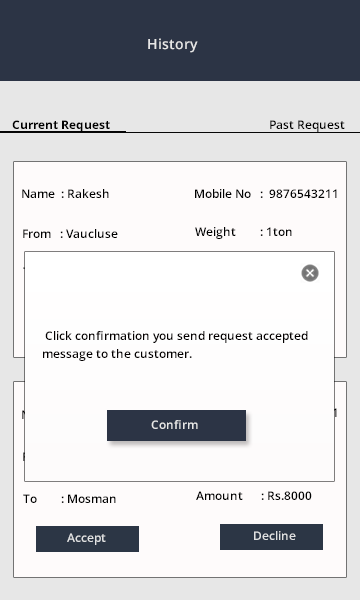
<style>
.page{position:relative;width:360px;height:600px;background:#fefbfb}
.page>*{position:absolute;margin:0}
.t1{font:14px "OpenSans-Semibold";color:#e7e7e7}
.t2{font:12px "OpenSans-Bold";color:#000000}
.t3{font:12px "OpenSans-Semibold";color:#000000}
.t4{font:12px/6px "OpenSans-Semibold";color:#030000}
.t5{font:12px "OpenSans-Semibold";color:#e7e7e7}
.t6{font:12px "OpenSans-Semibold";color:#e0e1e2}
</style>
<div class="page">
<p class="t1" style="left:148px;top:38px;width:50px;height:15px">History</p>
<p class="t2" style="left:12px;top:120px;width:98px;height:12px">Current Request</p>
<p class="t3" style="left:270px;top:120px;width:75px;height:12px">Past Request</p>
<p class="t3" style="left:22px;top:189px;width:87px;height:9px">Name  : Rakesh</p>
<p class="t3" style="left:195px;top:189px;width:142px;height:9px">Mobile No   :  9876543211</p>
<p class="t3" style="left:23px;top:229px;width:95px;height:9px">From   : Vaucluse</p>
<p class="t3" style="left:195px;top:227px;width:97px;height:12px">Weight        : 1ton</p>
<p class="t4" style="left:43px;top:331px;width:265px;height:30px">Click confirmation you send request accepted <br><br><br>message to the customer.</p>
<p class="t5" style="left:151px;top:420px;width:47px;height:9px">Confirm</p>
<p class="t3" style="left:23px;top:494px;width:93px;height:9px">To        : Mosman</p>
<p class="t3" style="left:196px;top:491px;width:116px;height:9px">Amount      : Rs.8000</p>
<p class="t6" style="left:67px;top:533px;width:39px;height:12px">Accept</p>
<p class="t6" style="left:254px;top:531px;width:42px;height:9px">Decline</p>
</div>
